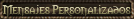
<style>
.page{position:relative;width:134px;height:19px}
.page>*{position:absolute;margin:0}
.t1{font:12px "Morpheus"}
</style>
<div class="page">
<p class="t1" style="left:2px;top:5px;width:129px;height:12px">Mensajes Personalizados</p>
</div>
